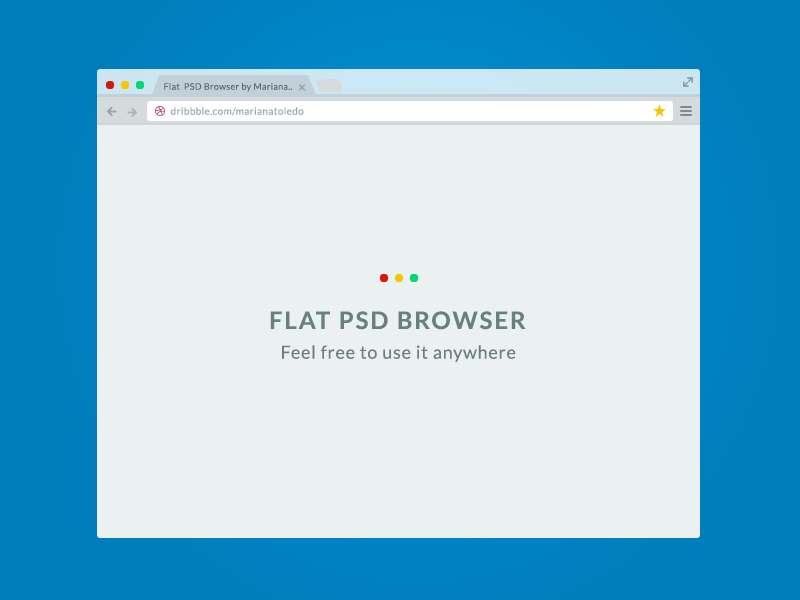
<style>
.page{position:relative;width:800px;height:600px;background:#ebf0f1}
.page>*{position:absolute;margin:0}
.t1{font:9px "Lato-Regular";letter-spacing:0.03em;color:#5c6d6e}
.t2{font:10px "Lato-Regular";letter-spacing:0.035em;color:#9aa7a7}
.t3{font:24px "Lato-Bold";letter-spacing:0.08em;color:#6b7f81;text-transform:uppercase}
.t4{font:18px "Lato-Regular";letter-spacing:0.04em;color:#6b7f81}
</style>
<div class="page">
<p class="t1" style="left:164px;top:83px;width:128px;height:9px">Flat  PSD Browser by Mariana..</p>
<p class="t2" style="left:170px;top:107px;width:134px;height:9px">dribbble.com/marianatoledo</p>
<p class="t3" style="left:270px;top:311px;width:256px;height:19px">Flat PSD Browser</p>
<p class="t4" style="left:282px;top:345px;width:234px;height:17px">Feel free to use it anywhere</p>
</div>
